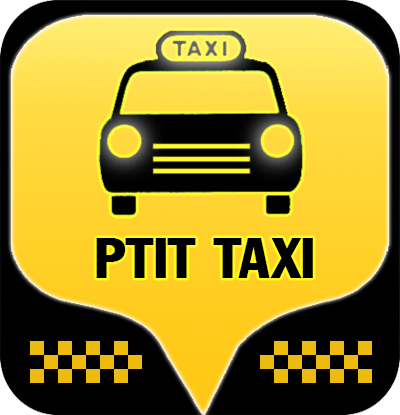
<style>
.page{position:relative;width:400px;height:415px;background:#000000}
.page>*{position:absolute;margin:0}
.t1{font:56px "VNI-Franko";color:#000000}
</style>
<div class="page">
<p class="t1" style="left:96px;top:238px;width:217px;height:40px">PTIT TAXI</p>
</div>
